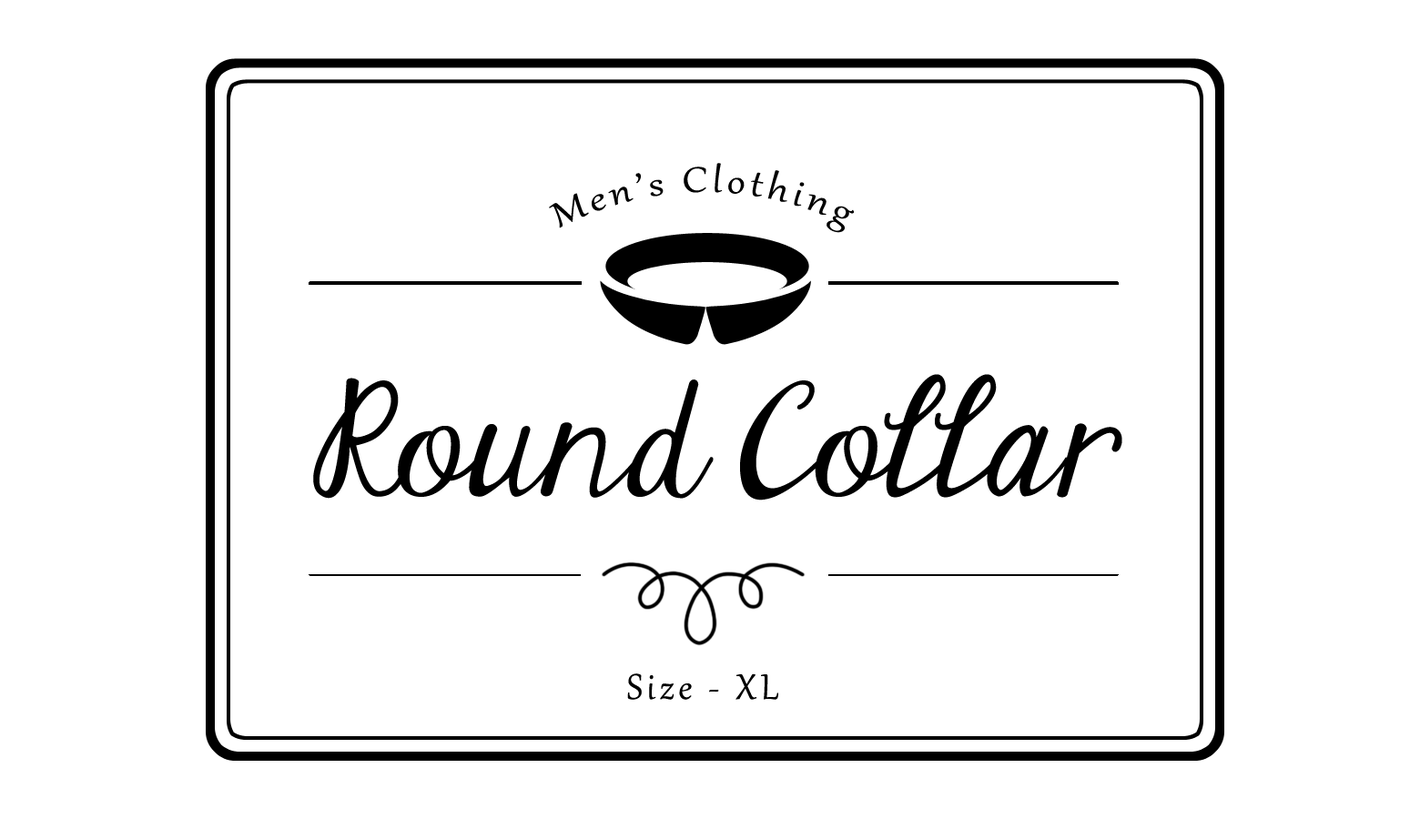
<style>
.page{position:relative;width:1420px;height:839px;background:#ffffff}
.page>*{position:absolute;margin:0}
.t1{font:43.7px "Gabriola";letter-spacing:0.1em;color:#000000}
.t2{font:132.7px "JandaElegantHandwriting";color:#000000}
</style>
<div class="page">
<p class="t1" style="left:549px;top:163px;width:305px;height:70px">Men’s Clothing</p>
<p class="t2" style="left:313px;top:374px;width:810px;height:127px">Round Collar</p>
<p class="t1" style="left:627px;top:674px;width:151px;height:26px">Size - XL</p>
</div>
